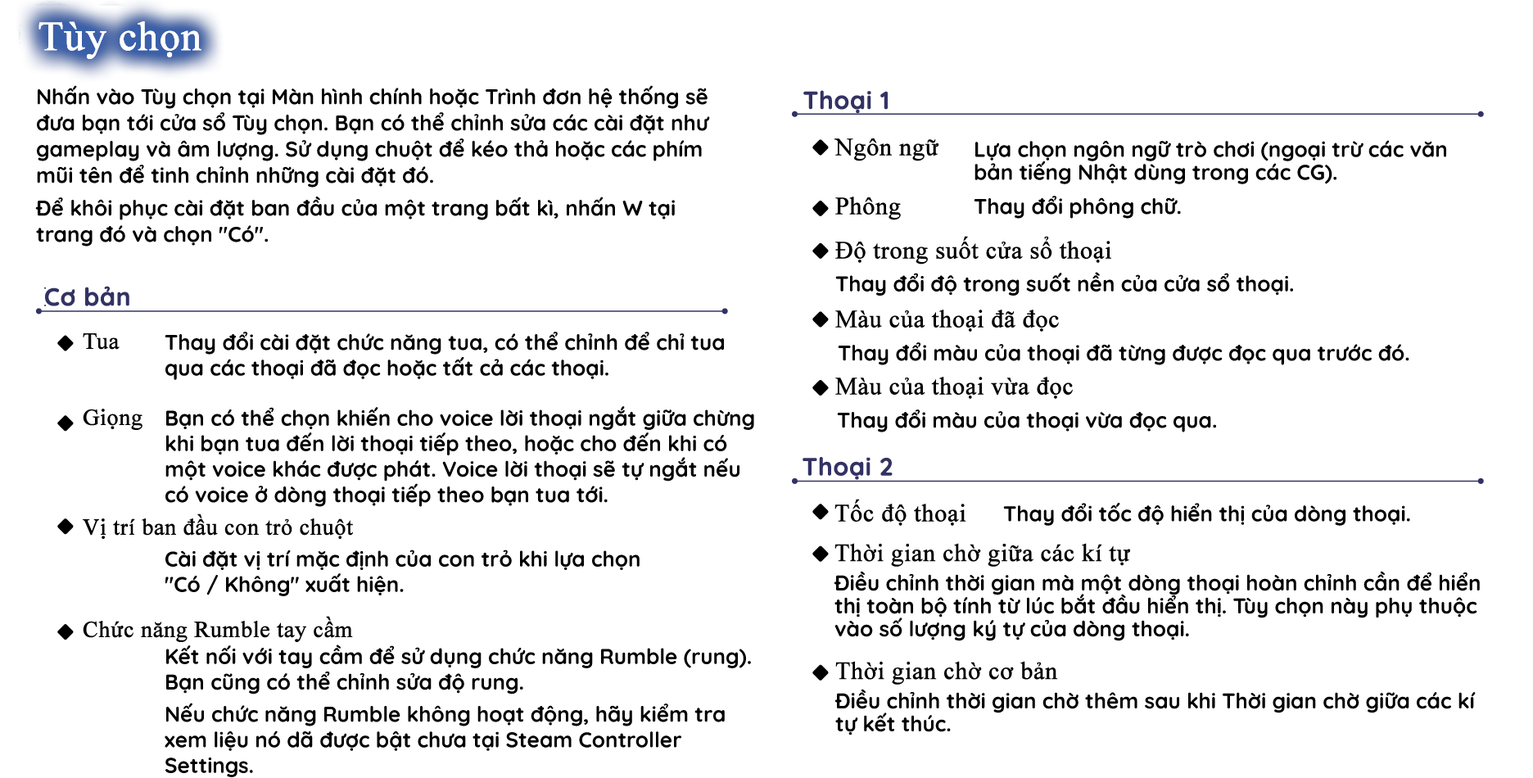
<style>
.page{position:relative;width:1533px;height:778px;background:#ffffff}
.page>*{position:absolute;margin:0}
.t1{font:40.9px "TimesNewRomanPSMT";color:#ffffff;font-weight:bold}
.t2{font:21.3px/26.2px "Quicksand-Bold";color:#000000}
.t3{font:24.6px "Quicksand-Bold";color:#323264;font-weight:bold}
.t4{font:24.6px/21.3px "TimesNewRomanPSMT";color:#000000;font-weight:bold}
.t5{font:24.6px/22.9px "TimesNewRomanPSMT";color:#000000;font-weight:bold}
.t6{font:24.6px/3.3px "TimesNewRomanPSMT";color:#000000;font-weight:bold}
.t7{font:24.6px/37.7px "TimesNewRomanPSMT";color:#000000;font-weight:bold}
.t8{font:24.6px/32.8px "TimesNewRomanPSMT";color:#000000;font-weight:bold}
.t9{font:21.3px/22.9px "Quicksand-Bold";color:#000000}
.t10{font:21.3px "Quicksand-Bold";color:#000000}
.t11{font:22.9px/18.8px "TimesNewRomanPSMT";color:#000000;font-weight:bold}
.t12{font:22.9px/1.6px "TimesNewRomanPSMT";color:#000000;font-weight:bold}
.t13{font:22.9px/19.7px "TimesNewRomanPSMT";color:#000000;font-weight:bold}
.t14{font:21.3px/11.5px "Quicksand-Bold";color:#000000}
.t15{font:21.3px/29.5px "Quicksand-Bold";color:#000000}
.t16{font:24.6px "TimesNewRomanPSMT";color:#000000;font-weight:bold}
</style>
<div class="page">
<p class="t1" style="left:38px;top:21px;width:163px;height:38px">Tùy chọn</p>
<p class="t1" style="left:38px;top:21px;width:163px;height:38px">Tùy chọn</p>
<p class="t2" style="left:35px;top:85px;width:675px;height:161px">Nhấn vào Tùy chọn tại Màn hình chính hoặc Trình đơn hệ thống sẽ đưa bạn tới cửa sổ Tùy chọn. Bạn có thể chỉnh sửa các cài đặt như gameplay và âm lượng. Sử dụng chuột để kéo thả hoặc các phím mũi tên để tinh chỉnh những cài đặt đó.<br>Để khôi phục cài đặt ban đầu của một trang bất kì, nhấn W tại trang đó và chọn "Có".</p>
<p class="t3" style="left:803px;top:90px;width:85px;height:23px">Thoại 1</p>
<p class="t4" style="left:834px;top:138px;width:277px;height:261px"><span class="t5">Ngôn ngữ<br><br>P</span><span class="t6">hông<br></span><span class="t7">Độ trong s</span><span class="t5">uốt cửa sổ thoại<br><br></span><span class="t8">Màu của thoại đã đọc<br><br></span>Màu của thoại vừa đọc</p>
<p class="t9" style="left:974px;top:140px;width:472px;height:44px">Lựa chọn ngôn ngữ trò chơi (ngoại trừ các văn bản tiếng Nhật dùng trong các CG).</p>
<p class="t10" style="left:974px;top:196px;width:207px;height:23px">Thay đổi phông chữ.</p>
<p class="t10" style="left:835px;top:272px;width:458px;height:24px">Thay đổi độ trong suốt nền của cửa sổ thoại.</p>
<p class="t3" style="left:45px;top:286px;width:84px;height:20px">Cơ bản</p>
<p class="t11" style="left:83px;top:333px;width:270px;height:309px">Tua<br><br><br>Giọng<br><br><br><br><span class="t12"><br>Vị trí</span> ban đầu con trỏ chuột<br><br><br><br>Chức năng Rum<span class="t13">ble tay cầm</span></p>
<p class="t10" style="left:165px;top:332px;width:589px;height:445px">Thay đổi cài đặt chức năng tua, có thể chỉnh để chỉ tua qua các thoại đã đọc hoặc tất cả các thoại.<br><span class="t14"><br>Bạn có thể chọn khiến cho</span> voice lời thoại ngắt giữa chừng khi bạn tua đến lời thoại tiếp theo, hoặc cho đến khi có một voice khác được phát. Voice lời thoại sẽ tự ngắt nếu có voice ở dòng thoại tiếp theo bạn tua tới.<br><br>Cài đặt vị trí mặc định của con trỏ khi lựa chọn <br>"Có / Không" xuất hiện.<br><span class="t15"><br>Kết nối với ta</span>y cầm để sử dụng chức năng Rumble (rung). Bạn cũng có thể chỉnh sửa độ rung.<br>Nếu chức năng Rumble không hoạt động, hãy kiểm tra xem liệu nó dã được bật chưa tại Steam Controller <br>Settings.</p>
<p class="t10" style="left:838px;top:342px;width:571px;height:23px">Thay đổi màu của thoại đã từng được đọc qua trước đó.</p>
<p class="t10" style="left:837px;top:409px;width:379px;height:23px">Thay đổi màu của thoại vừa đọc qua.</p>
<p class="t3" style="left:802px;top:457px;width:91px;height:23px">Thoại 2</p>
<p class="t10" style="left:834px;top:499px;width:576px;height:27px"><span class="t16">Tốc độ thoại </span>     Thay đổi tốc độ hiển thị của dòng thoại.</p>
<p class="t9" style="left:834px;top:543px;width:646px;height:98px"><span class="t5">Thời gian chờ giữa các kí tự<br></span>Điều chỉnh thời gian mà một dòng thoại hoàn chỉnh cần để hiển thị toàn bộ tính từ lúc bắt đầu hiển thị. Tùy chọn này phụ thuộc vào số lượng ký tự của dòng thoại.</p>
<p class="t9" style="left:834px;top:661px;width:642px;height:74px"><span class="t5">Thời gian chờ cơ bản<br></span>Điều chỉnh thời gian chờ thêm sau khi Thời gian chờ giữa các kí tự kết thúc.</p>
</div>
